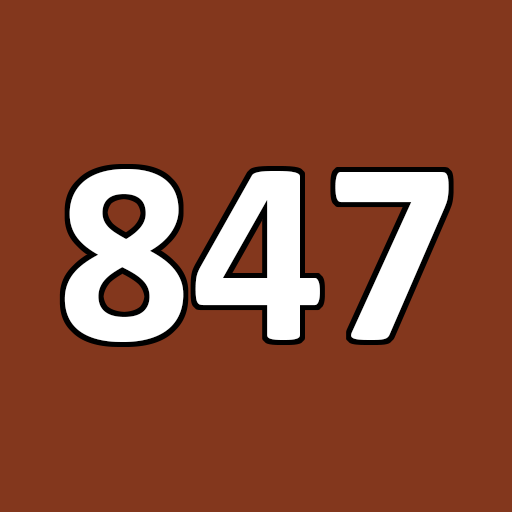
<style>
.page{position:relative;width:512px;height:512px;background:#83371d}
.page>*{position:absolute;margin:0}
.t1{font:264.6px "Calibri-Bold";color:#ffffff}
</style>
<div class="page">
<p class="t1" style="left:64px;top:169px;width:385px;height:173px">847</p>
</div>
